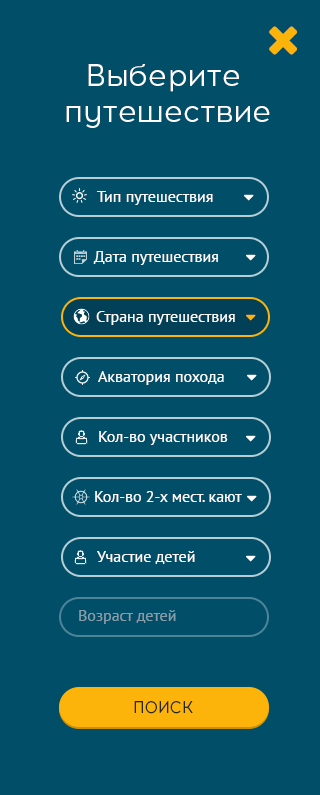
<style>
.page{position:relative;width:320px;height:795px;background:#014e69}
.page>*{position:absolute;margin:0}
.t1{font:30px "Acrom-Regular";color:#ffffff}
.t2{font:16px "PTSans-Regular";color:#ffffff}
.t3{font:16px "PTSans-Regular";color:#869eaa}
.t4{font:16px "Acrom-Regular";color:#282828;text-transform:uppercase}
</style>
<div class="page">
<p class="t1" style="left:66px;top:64px;width:204px;height:64px;text-align:center">Выберите <br>путешествие</p>
<p class="t2" style="left:97px;top:191px;width:116px;height:14px">Тип путешествия</p>
<p class="t2" style="left:93px;top:251px;width:125px;height:14px">Дата путешествия</p>
<p class="t2" style="left:96px;top:311px;width:139px;height:14px">Страна путешествия</p>
<p class="t2" style="left:98px;top:371px;width:126px;height:14px">Акватория похода</p>
<p class="t2" style="left:99px;top:431px;width:129px;height:14px">Кол-во участников</p>
<p class="t2" style="left:95px;top:491px;width:147px;height:11px">Кол-во 2-х мест. кают</p>
<p class="t2" style="left:97px;top:551px;width:98px;height:13px">Участие детей</p>
<p class="t3" style="left:79px;top:610px;width:97px;height:14px">Возраст детей</p>
<p class="t4" style="left:134px;top:701px;width:59px;height:13px">Поиск</p>
</div>
